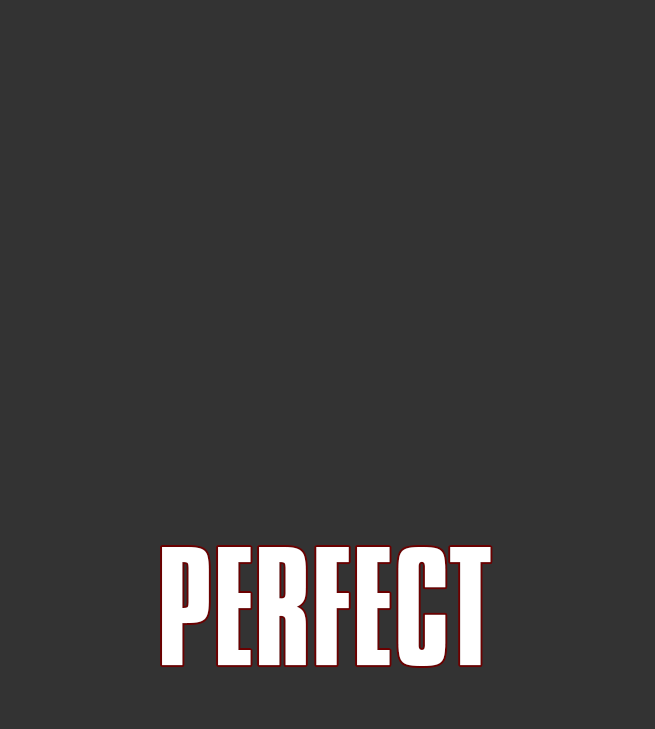
<style>
.page{position:relative;width:655px;height:729px;background:#333333}
.page>*{position:absolute;margin:0}
.t1{font:145.5px "Compacta";color:#ffffff;font-variant:small-caps}
</style>
<div class="page">
<p class="t1" style="left:162px;top:547px;width:329px;height:119px">PERFECT</p>
</div>
